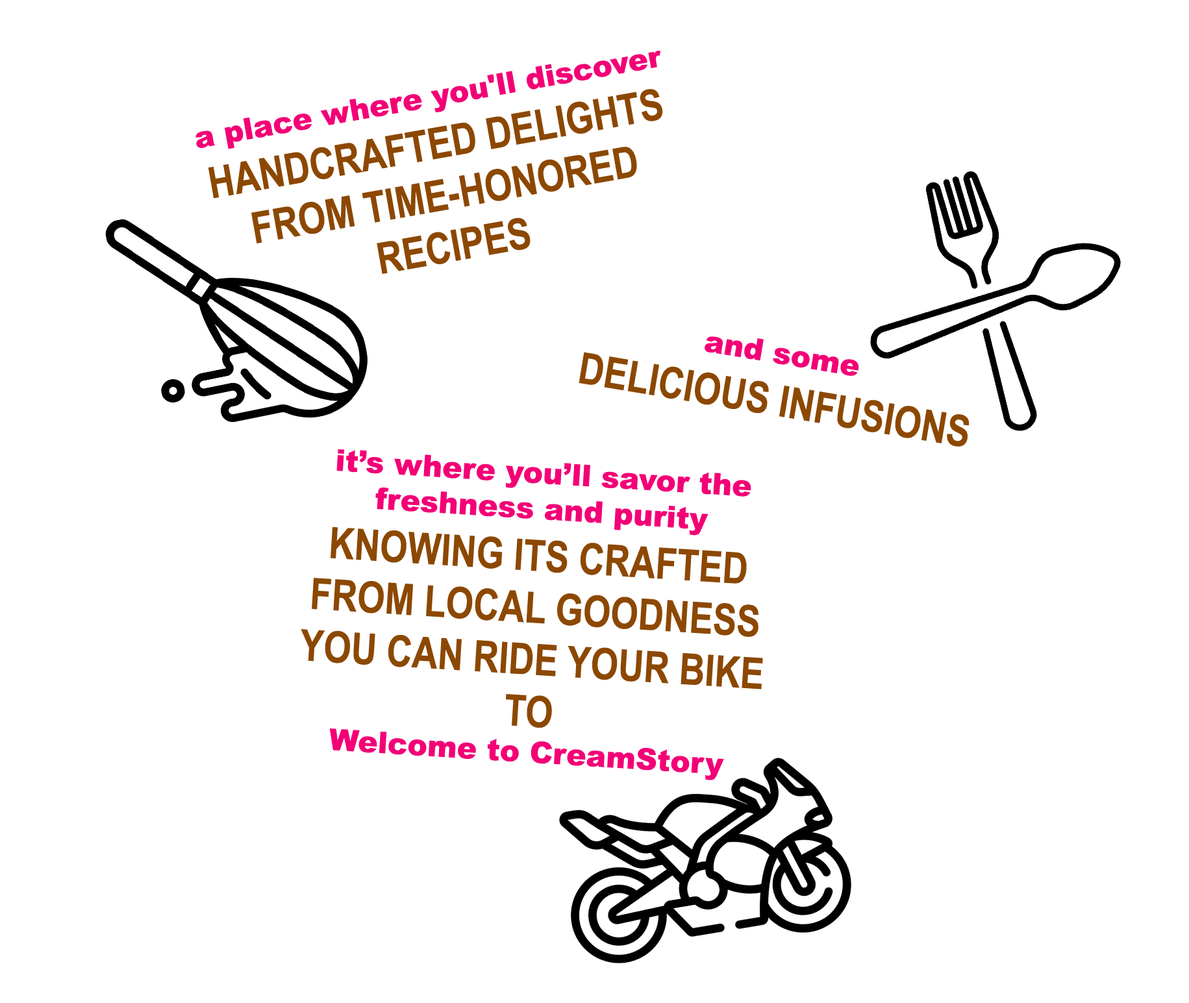
<style>
.page{position:relative;width:1189px;height:1003px;background:#ffffff}
.page>*{position:absolute;margin:0}
.t1{font:43.3px "ArialNarrow-Bold";color:#8c4801}
.t2{font:29.8px "Arial-Black";color:#f30076}
</style>
<div class="page">
<p class="t1" style="left:195px;top:51px;width:468px;height:223px;text-align:center;rotate:-10deg"><span class="t2">a place where you'll discover<br></span>HANDCRAFTED DELIGHTS<br>FROM TIME-HONORED RECIPES</p>
<p class="t1" style="left:578px;top:336px;width:391px;height:111px;text-align:center;rotate:9deg"><span class="t2">and some<br></span>DELICIOUS INFUSIONS</p>
<p class="t1" style="left:301px;top:449px;width:462px;height:331px;text-align:center;rotate:4deg"><span class="t2">it’s where you’ll savor the freshness and purity<br></span>KNOWING ITS CRAFTED FROM LOCAL GOODNESS YOU CAN RIDE YOUR BIKE TO<br><span class="t2">Welcome to CreamStory</span></p>
</div>
